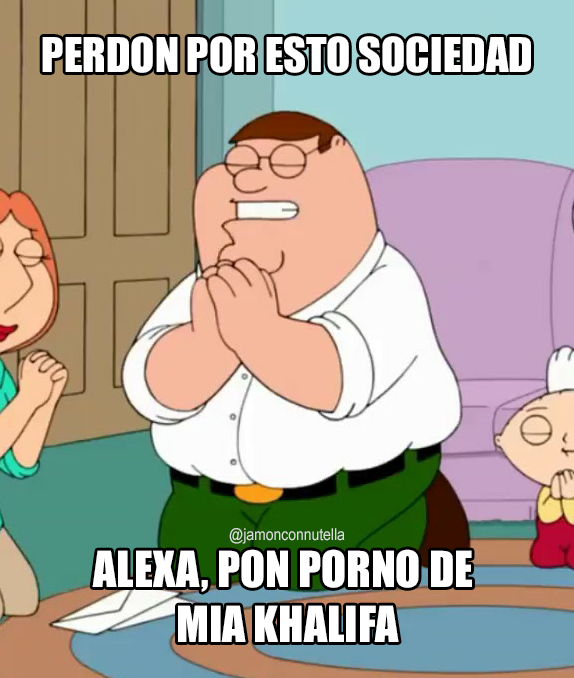
<style>
.page{position:relative;width:574px;height:678px}
.page>*{position:absolute;margin:0}
.t1{font:44.3px "Impact";color:#ffffff}
.t2{font:16.4px "ArialNarrow";color:#d7dfd6;scale:1.04 1}
.t3{font:45.9px "Impact";color:#ffffff}
</style>
<div class="page">
<p class="t1" style="left:42px;top:36px;width:489px;height:37px">PERDON POR ESTO SOCIEDAD</p>
<p class="t2" style="left:229px;top:528px;width:116px;height:16px">@jamonconnutella</p>
<p class="t3" style="left:92px;top:549px;width:380px;height:93px;text-align:center">ALEXA, PON PORNO DE <br>MIA KHALIFA</p>
</div>
